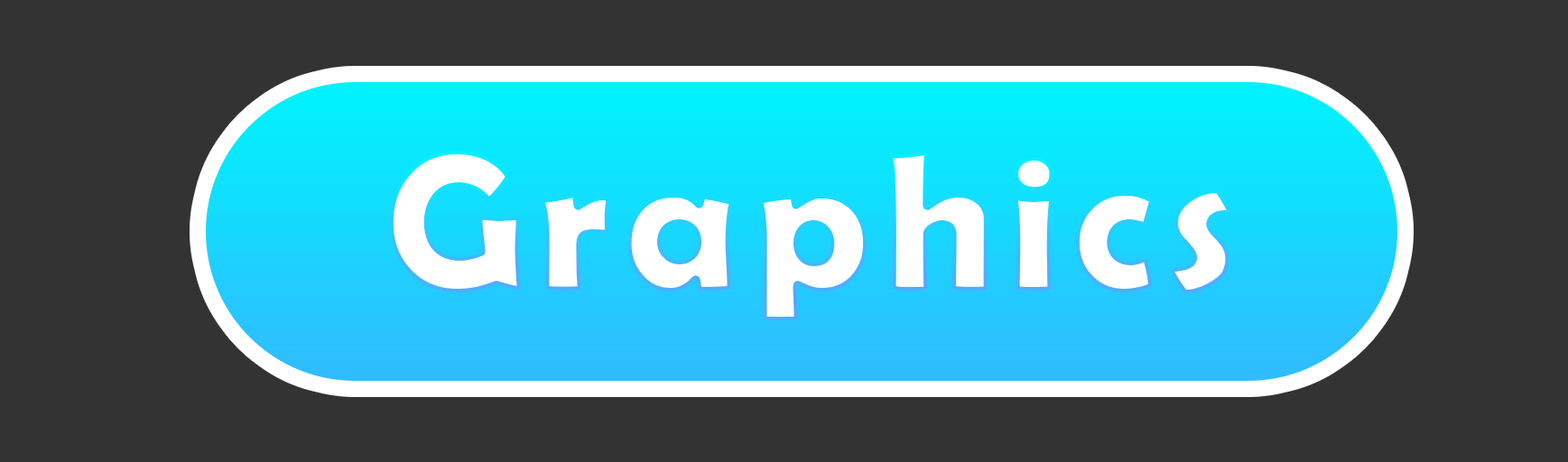
<style>
.page{position:relative;width:1568px;height:462px;background:#333333}
.page>*{position:absolute;margin:0}
.t1{font:197.6px "BerlinSansFBDemi-Bold";letter-spacing:0.06em;color:#ffffff}
</style>
<div class="page">
<p class="t1" style="left:389px;top:151px;width:842px;height:169px">Graphics</p>
</div>
